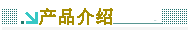
<style>
.page{position:relative;width:188px;height:30px;background:#ffffff}
.page>*{position:absolute;margin:0}
.t1{font:18px "SimSun";color:#a68d01;font-weight:bold}
</style>
<div class="page">
<p class="t1" style="left:39px;top:8px;width:74px;height:17px">产品介绍</p>
</div>
